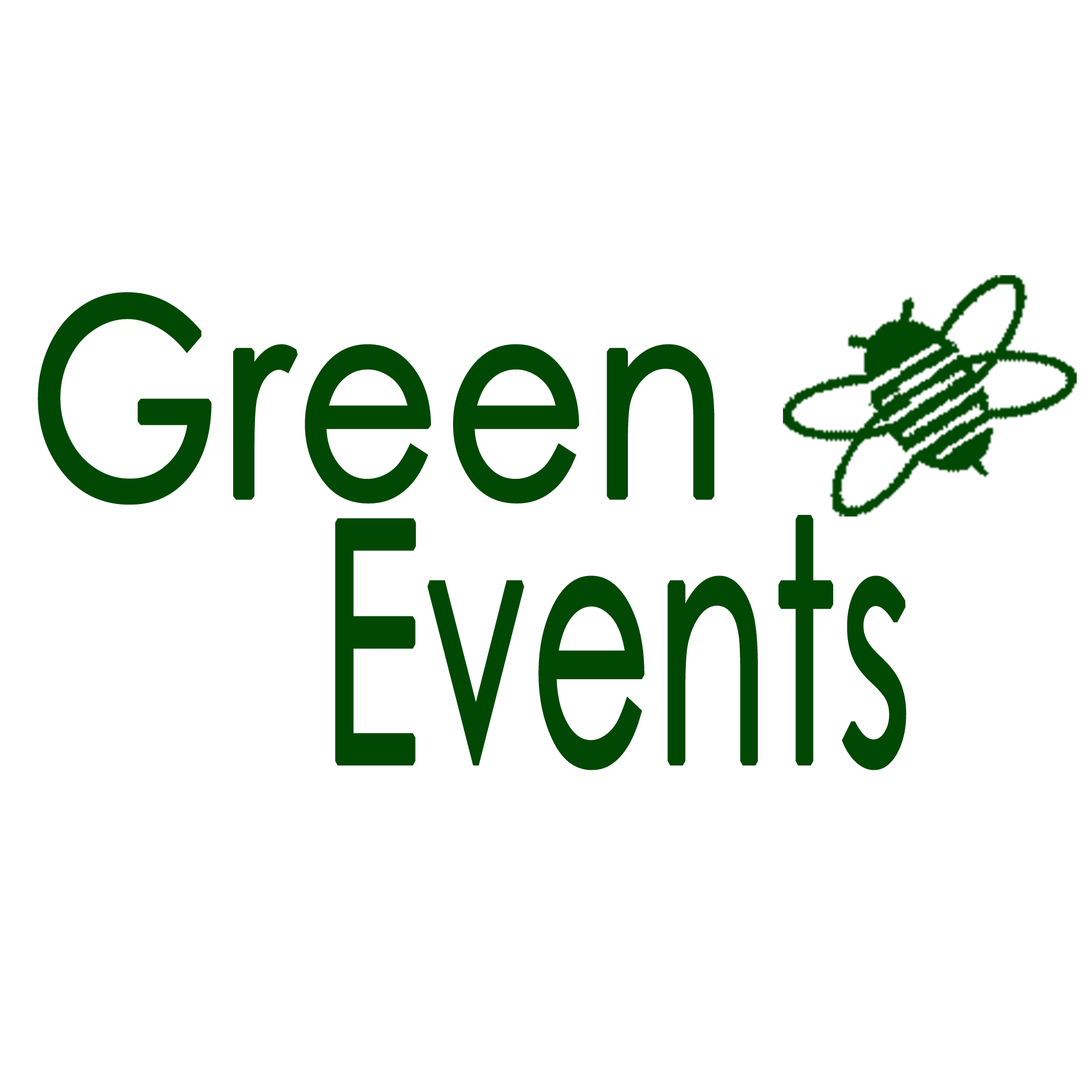
<style>
.page{position:relative;width:1092px;height:1092px;background:#ffffff}
.page>*{position:absolute;margin:0}
.t1{font:271.7px "CenturyGothic";color:#004803;font-weight:bold;scale:0.81 1}
.t2{font:331.6px "CenturyGothic";color:#004803;font-weight:bold;scale:0.55 1}
</style>
<div class="page">
<p class="t1" style="left:38px;top:292px;width:677px;height:213px">Green</p>
<p class="t2" style="left:335px;top:515px;width:571px;height:255px">Events</p>
</div>
